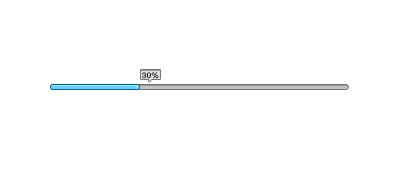
<style>
.page{position:relative;width:400px;height:183px;background:#ffffff}
.page>*{position:absolute;margin:0}
.t1{font:8px "Helvetica";letter-spacing:0.05em;text-transform:uppercase}
</style>
<div class="page">
<p class="t1" style="left:142px;top:72px;width:17px;height:7px">30%</p>
</div>
